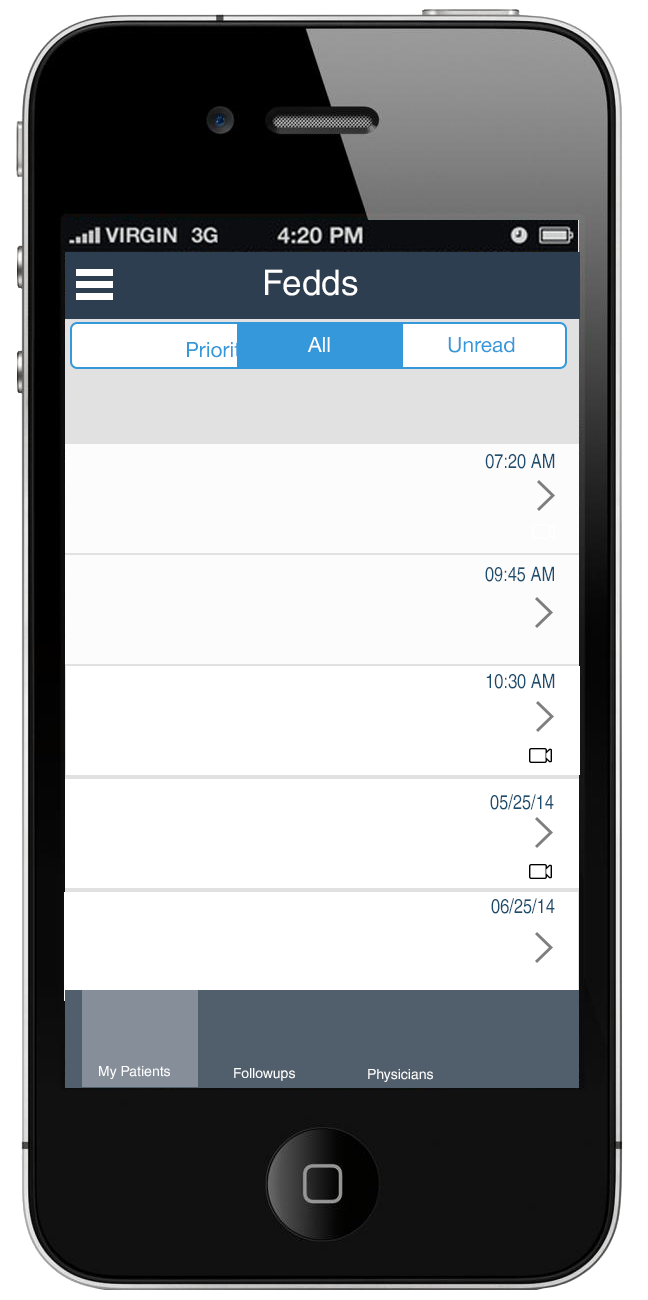
<style>
.page{position:relative;width:648px;height:1300px;background:#ffffff}
.page>*{position:absolute;margin:0}
.t1{font:35px "HelveticaLT";color:#ffffff}
.t2{font:21.1px "HelveticaNeue";color:#3498db}
.t3{font:21.1px "HelveticaNeue";color:#ffffff}
.t4{font:20px "HelveticaLT-Narrow";color:#1b4d6f}
.t5{font:20px "HelveticaLT-Narrow";color:#1b4d6f;text-transform:uppercase}
.t6{font:14px "HelveticaLT";color:#ffffff}
</style>
<div class="page">
<p class="t1" style="left:265px;top:269px;width:93px;height:27px">Fedds</p>
<p class="t2" style="left:187px;top:342px;width:64px;height:20px">Priority</p>
<p class="t3" style="left:307px;top:337px;width:23px;height:15px">All</p>
<p class="t2" style="left:448px;top:337px;width:67px;height:16px">Unread</p>
<p class="t4" style="left:485px;top:453px;width:70px;height:16px"><span class="t5"> </span>07:20 AM</p>
<p class="t4" style="left:485px;top:566px;width:69px;height:16px"><span class="t5">09</span>:45 AM</p>
<p class="t4" style="left:486px;top:673px;width:69px;height:16px"><span class="t5"> </span>10:30 AM</p>
<p class="t5" style="left:490px;top:794px;width:64px;height:16px">05/<span class="t4">25/</span>14</p>
<p class="t5" style="left:491px;top:898px;width:64px;height:16px">06/<span class="t4">25/</span>14</p>
<p class="t6" style="left:99px;top:1066px;width:71px;height:13px">My Patients</p>
<p class="t6" style="left:234px;top:1068px;width:61px;height:13px">Followups</p>
<p class="t6" style="left:368px;top:1069px;width:65px;height:13px">Physicians</p>
</div>
